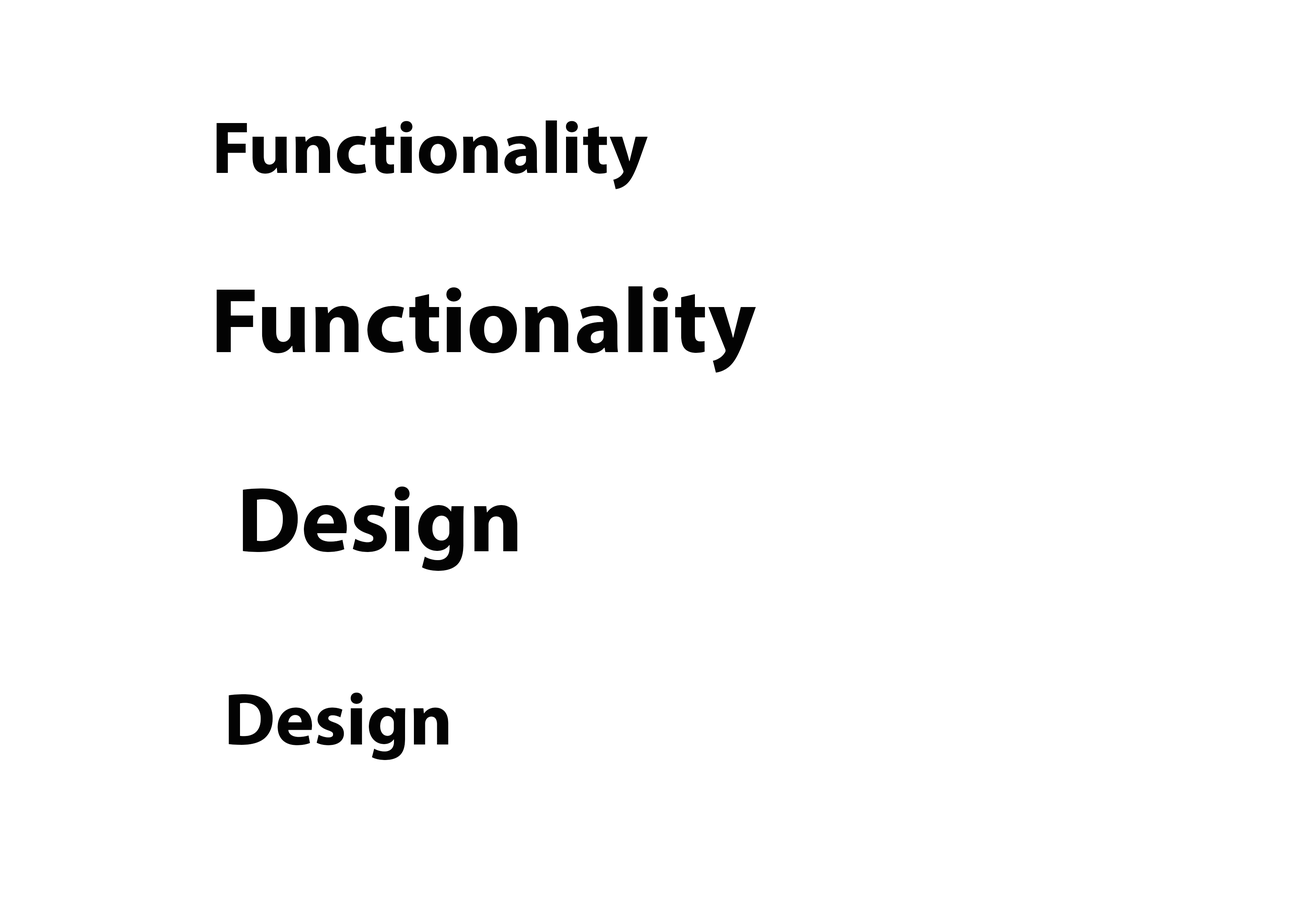
<style>
.page{position:relative;width:1296px;height:920px;background:#ffffff}
.page>*{position:absolute;margin:0}
.t1{font:73.9px "MyriadPro-Bold";color:#030303}
.t2{font:92.3px "MyriadPro-Bold";color:#030303}
</style>
<div class="page">
<p class="t1" style="left:216px;top:120px;width:432px;height:69px">Functionality</p>
<p class="t2" style="left:216px;top:286px;width:540px;height:87px">Functionality</p>
<p class="t2" style="left:243px;top:486px;width:274px;height:85px">Design</p>
<p class="t1" style="left:229px;top:692px;width:219px;height:68px">Design</p>
</div>
